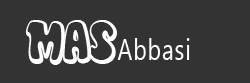
<style>
.page{position:relative;width:250px;height:83px;background:#333333}
.page>*{position:absolute;margin:0}
.t1{font:59.8px "Disko";letter-spacing:0.04em;color:#ffffff;scale:0.79 1}
.t2{font:29.4px "Gadugi";letter-spacing:0.04em;color:#ffffff;scale:0.78 1}
</style>
<div class="page">
<p class="t1" style="left:25px;top:20px;width:92px;height:45px">Mas</p>
<p class="t2" style="left:117px;top:38px;width:73px;height:22px">Abbasi</p>
</div>
